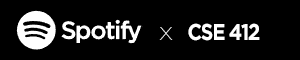
<style>
.page{position:relative;width:300px;height:60px;background:#000000}
.page>*{position:absolute;margin:0}
.t1{font:22.7px "Gotham-Bold";letter-spacing:-0.06em;color:#ffffff;scale:0.86 1}
.t2{font:24.4px "Roboto-Thin";letter-spacing:-0.04em;color:#ffffff;scale:1.2 1}
</style>
<div class="page">
<p class="t1" style="left:159px;top:23px;width:101px;height:18px"><span class="t2">x   </span>CSE 412</p>
</div>
